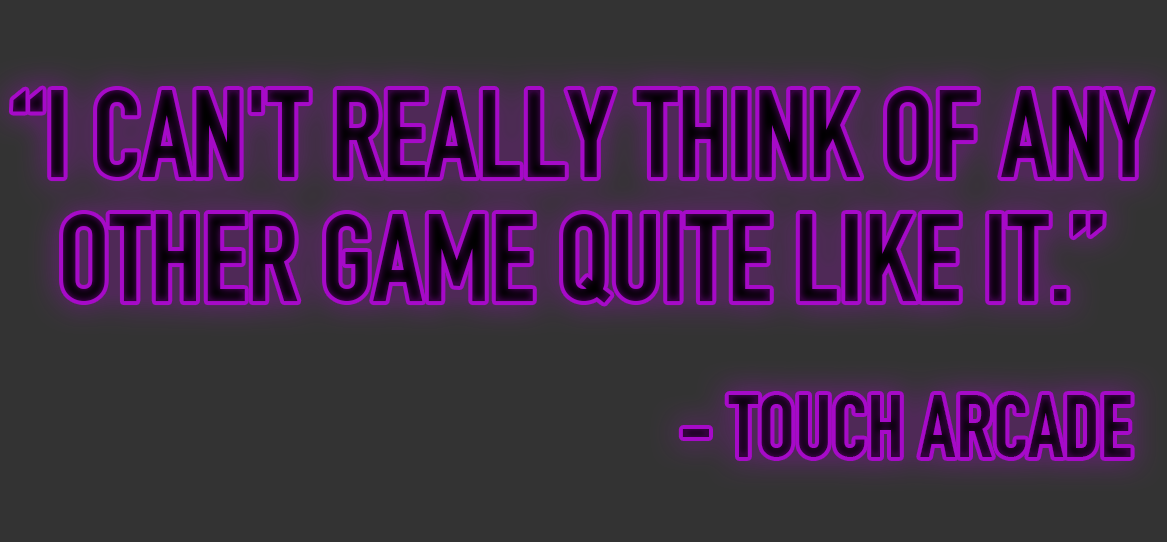
<style>
.page{position:relative;width:1167px;height:542px;background:#333333}
.page>*{position:absolute;margin:0}
.t1{font:121.6px/124.2px "DINEngschrift";color:#17011b;text-transform:uppercase}
.t2{font:86.6px "DINEngschrift";color:#23022a;text-transform:uppercase}
</style>
<div class="page">
<p class="t1" style="left:12px;top:89px;width:1140px;height:214px;text-align:center">“I can't really think of any <br>other game quite like it.”</p>
<p class="t2" style="left:682px;top:395px;width:449px;height:62px">- touch arcade</p>
</div>
